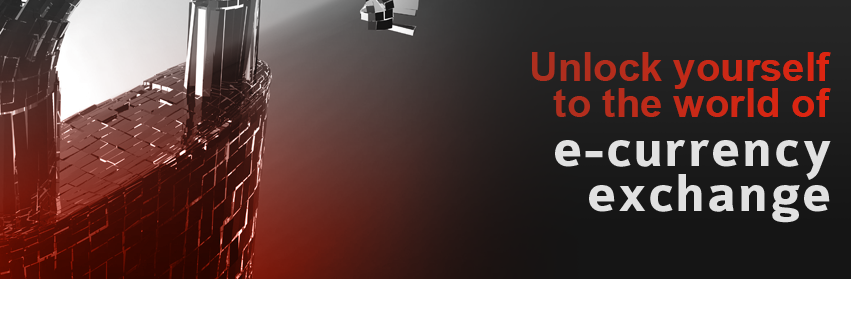
<style>
.page{position:relative;width:851px;height:315px}
.page>*{position:absolute;margin:0}
.t1{font:40px/36px "Arial-BoldMT";color:#ad2f1f}
.t2{font:55px/45px "Colaborate-Bold";letter-spacing:0.025em;color:#e1e1e1}
</style>
<div class="page">
<p class="t1" style="left:532px;top:52px;width:299px;height:65px;text-align:right">Unlock yourself<br>to the world of</p>
<p class="t2" style="left:555px;top:140px;width:276px;height:83px;text-align:right">e-currency<br>exchange</p>
</div>
